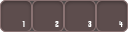
<style>
.page{position:relative;width:128px;height:32px;background:#5d4d4d}
.page>*{position:absolute;margin:0}
.t1{font:8px "KenyanCoffeeRg-Regular";color:#ffffff}
</style>
<div class="page">
<p class="t1" style="left:22px;top:21px;width:3px;height:6px">1</p>
<p class="t1" style="left:55px;top:21px;width:4px;height:6px">2</p>
<p class="t1" style="left:88px;top:21px;width:4px;height:6px">3</p>
<p class="t1" style="left:119px;top:21px;width:4px;height:6px">4</p>
</div>
